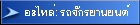
<style>
.page{position:relative;width:140px;height:25px}
.page>*{position:absolute;margin:0}
.t1{font:15.3px "EucrosiaDSE";color:#ffffff;scale:1.12 1}
</style>
<div class="page">
<p class="t1" style="left:25px;top:4px;width:105px;height:12px">ÍÐäËÅè:Ã¶¨Ñ¡ÃÂÒ¹Â¹µì</p>
</div>
